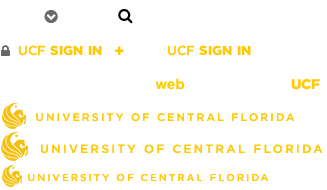
<style>
.page{position:relative;width:327px;height:190px;background:#ffffff}
.page>*{position:absolute;margin:0}
.t1{font:13px "Gotham-Black";letter-spacing:0.02em;color:#ffc904}
.t2{font:13px "Gotham-Medium";color:#ffc904}
.t3{font:14px "Gotham-Book";letter-spacing:-0.01em;color:#ffffff}
.t4{font:14px "Gotham-Bold";letter-spacing:-0.01em;color:#ffcc00}
.t5{font:14px "Gotham-Black";letter-spacing:-0.02em;color:#ffc904}
.t6{font:14px "Gotham-Medium";letter-spacing:-0.02em;color:#ffffff}
.t7{font:10.8px "Gotham-Medium";letter-spacing:0.2em;color:#ffc904;text-transform:uppercase}
.t8{font:11.8px "Gotham-Medium";letter-spacing:0.2em;color:#ffc904;text-transform:uppercase}
.t9{font:10px "Gotham-Medium";letter-spacing:0.2em;color:#ffc904;text-transform:uppercase}
</style>
<div class="page">
<p class="t1" style="left:18px;top:45px;width:84px;height:11px"><span class="t2">UCF</span> SIGN IN</p>
<p class="t1" style="left:167px;top:45px;width:84px;height:11px"><span class="t2">UCF</span> SIGN IN</p>
<p class="t3" style="left:155px;top:78px;width:82px;height:12px"><span class="t4">web</span>courses</p>
<p class="t5" style="left:271px;top:79px;width:49px;height:13px"><span class="t6">my</span>UCF</p>
<p class="t7" style="left:36px;top:113px;width:259px;height:9px">University of Central Florida</p>
<p class="t7" style="left:36px;top:113px;width:259px;height:9px">University of Central Florida</p>
<p class="t8" style="left:41px;top:144px;width:282px;height:10px">University of Central Florida</p>
<p class="t8" style="left:41px;top:144px;width:282px;height:10px">University of Central Florida</p>
<p class="t9" style="left:28px;top:174px;width:241px;height:7px">University of Central Florida</p>
<p class="t9" style="left:28px;top:174px;width:241px;height:7px">University of Central Florida</p>
</div>
